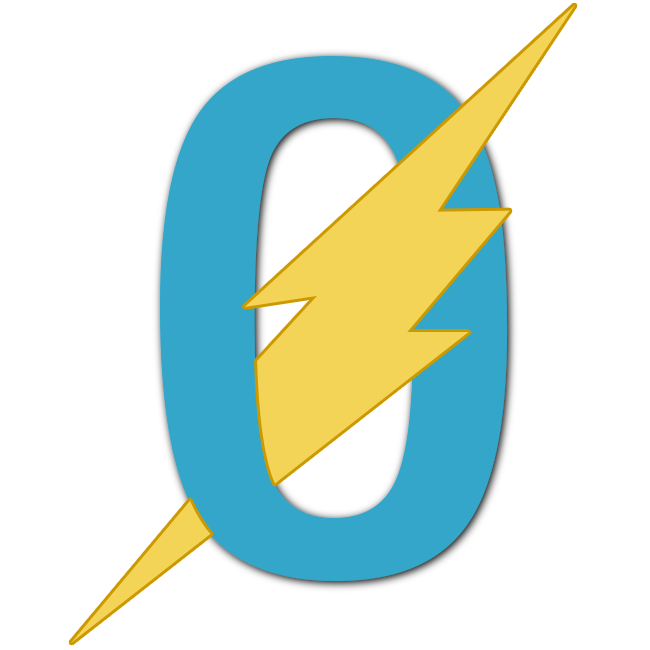
<style>
.page{position:relative;width:650px;height:650px;background:#ffffff}
.page>*{position:absolute;margin:0}
.t1{font:680px "Futura-CondensedMedium";letter-spacing:-0.025em;color:#33a6c9;scale:1.3 1}
</style>
<div class="page">
<p class="t1" style="left:159px;top:56px;width:349px;height:525px">O</p>
</div>
